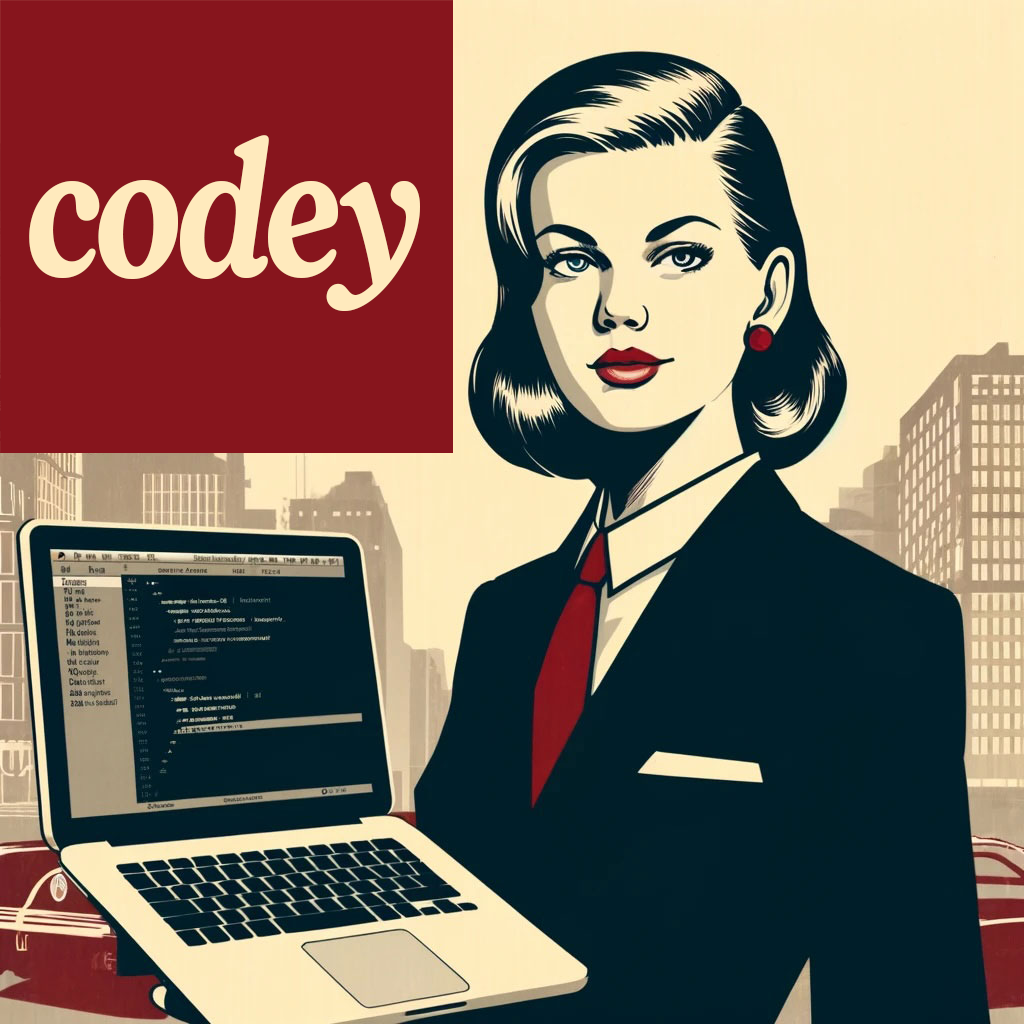
<style>
.page{position:relative;width:1024px;height:1024px}
.page>*{position:absolute;margin:0}
.t1{font:185.4px "NewSpirit-SemiBoldCondensedItalic";letter-spacing:-0.035em;color:#ffeabd}
</style>
<div class="page">
<p class="t1" style="left:29px;top:135px;width:391px;height:176px">codey</p>
</div>
